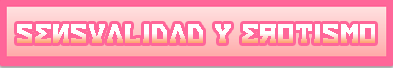
<style>
.page{position:relative;width:393px;height:68px;background:#ff6699}
.page>*{position:absolute;margin:0}
.t1{font:30px "Eurocentric"}
</style>
<div class="page">
<p class="t1" style="left:17px;top:24px;width:358px;height:19px">Sensualidad y erotismo</p>
</div>
